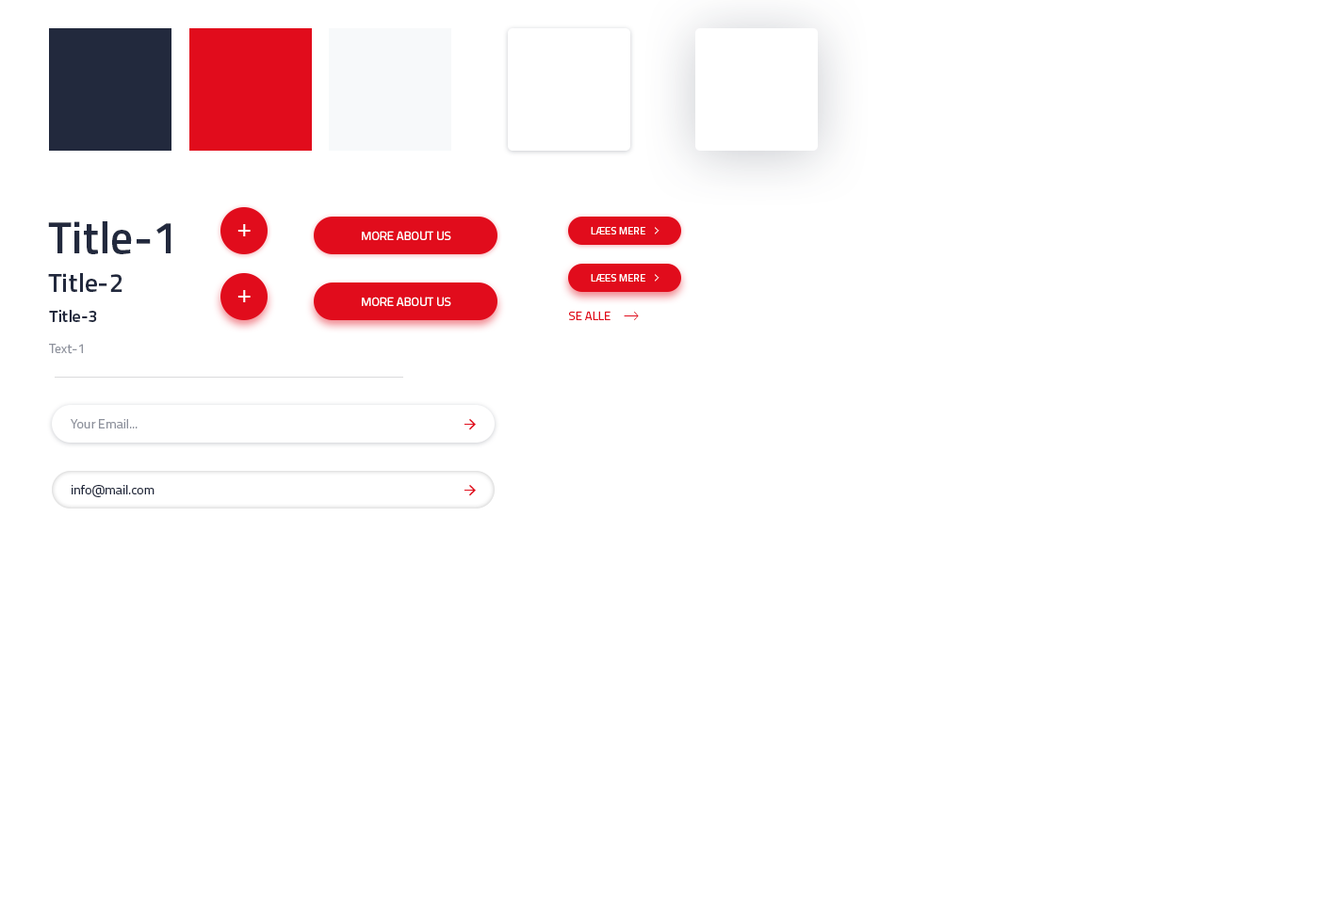
<style>
.page{position:relative;width:1319px;height:904px;background:#ffffff}
.page>*{position:absolute;margin:0}
.t1{font:45.2px "Titillium-Semibold";color:#22293d}
.t2{font:12.2px "Titillium-Regular";color:#ffffff}
.t3{font:10.4px "Titillium-Regular";color:#ffffff;text-transform:uppercase}
.t4{font:26.4px "Titillium-Semibold";color:#22293d}
.t5{font:17px "Titillium-Semibold";color:#22293d}
.t6{font:12.2px "Titillium-Regular";color:#e10c1c;text-transform:uppercase}
.t7{font:13.2px "Titillium-Regular";color:#8d919c}
.t8{font:13.2px "Titillium-Regular";color:#22293d}
</style>
<div class="page">
<p class="t1" style="left:48px;top:221px;width:123px;height:33px">Title-1</p>
<p class="t2" style="left:362px;top:231px;width:89px;height:9px">MORE ABOUT US</p>
<p class="t3" style="left:591px;top:227px;width:54px;height:8px">LÆES MERE</p>
<p class="t4" style="left:48px;top:273px;width:74px;height:19px">Title-2</p>
<p class="t3" style="left:591px;top:274px;width:54px;height:8px">LÆES MERE</p>
<p class="t2" style="left:362px;top:297px;width:89px;height:9px">MORE ABOUT US</p>
<p class="t5" style="left:49px;top:310px;width:48px;height:12px">Title-3</p>
<p class="t6" style="left:569px;top:311px;width:41px;height:9px">Se alle</p>
<p class="t7" style="left:49px;top:344px;width:34px;height:10px">Text-1</p>
<p class="t7" style="left:71px;top:419px;width:67px;height:10px">Your Email...</p>
<p class="t8" style="left:72px;top:485px;width:82px;height:12px">info@mail.com</p>
</div>
